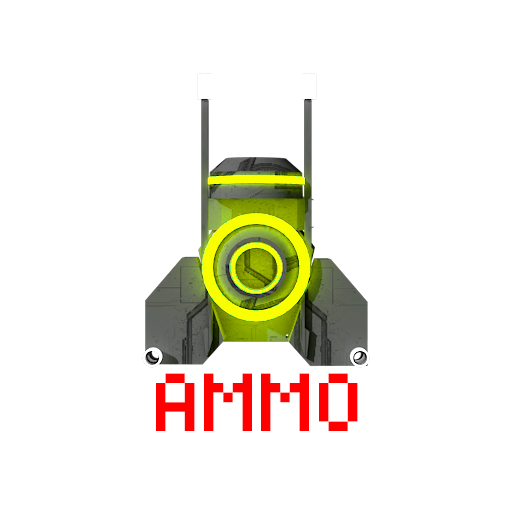
<style>
.page{position:relative;width:512px;height:512px;background:#ffffff}
.page>*{position:absolute;margin:0}
.t1{font:48px "Pixeled";color:#ff0000}
</style>
<div class="page">
<p class="t1" style="left:156px;top:373px;width:202px;height:58px">AMMO</p>
</div>
